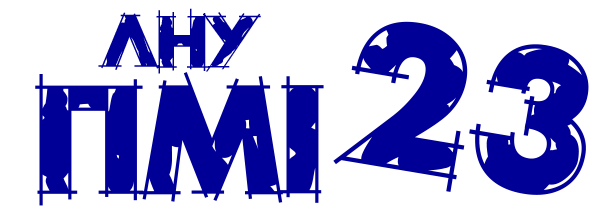
<style>
.page{position:relative;width:615px;height:214px;background:#ffffff}
.page>*{position:absolute;margin:0}
.t1{font:72px "RoughDraft";color:#000096}
.t2{font:200px "RoughDraft";color:#000096}
.t3{font:150px "RoughDraft";color:#000096}
</style>
<div class="page">
<p class="t1" style="left:98px;top:8px;width:163px;height:66px">ЛНУ</p>
<p class="t2" style="left:333px;top:21px;width:256px;height:174px;rotate:10deg"><span class="t1">    </span>23</p>
<p class="t3" style="left:35px;top:72px;width:289px;height:134px">ПМІ</p>
</div>
